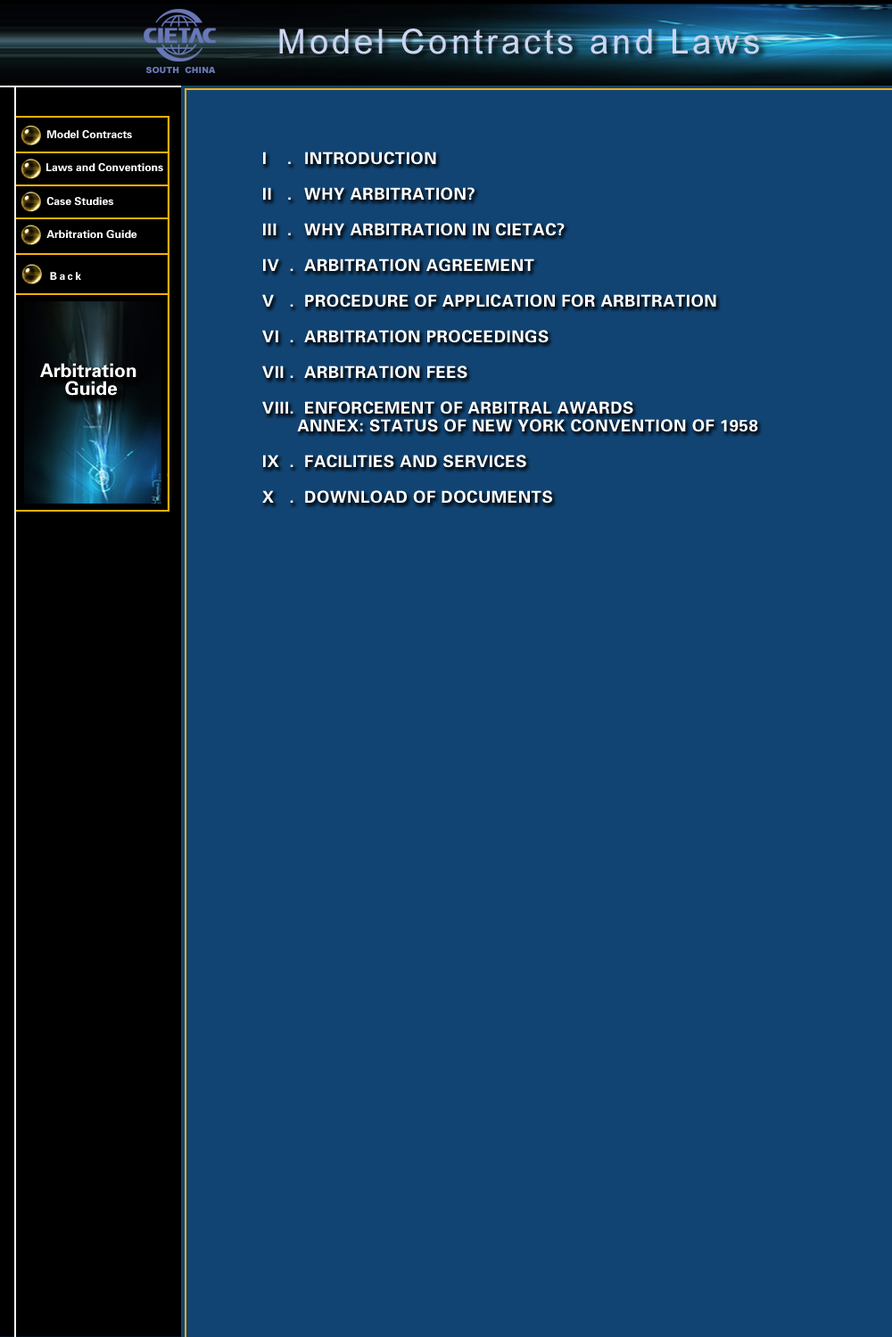
<style>
.page{position:relative;width:892px;height:1337px;background:#114473}
.page>*{position:absolute;margin:0}
.t1{font:10.9px "FZDHTJW--GB1-0";color:#ffffff}
.t2{font:16.6px/17.8px "FZDHTJW--GB1-0";letter-spacing:0.025em;color:#ffffff}
.t3{font:18.6px/17.9px "FZDHTJW--GB1-0";color:#ffffff}
</style>
<div class="page">
<p class="t1" style="left:47px;top:130px;width:85px;height:8px">Model Contracts</p>
<p class="t2" style="left:262px;top:152px;width:496px;height:352px">I    . INTRODUCTION  <br>                                                                                      <br>II   . WHY ARBITRATION?<br><br>III  . WHY ARBITRATION IN CIETAC?<br><br>IV  . ARBITRATION AGREEMENT<br><br>V   . PROCEDURE OF APPLICATION FOR ARBITRATION<br><br>VI  . ARBITRATION PROCEEDINGS<br><br>VII . ARBITRATION FEES<br><br>VIII. ENFORCEMENT OF ARBITRAL AWARDS<br>       ANNEX: STATUS OF NEW YORK CONVENTION OF 1958<br> <br>IX  . FACILITIES AND SERVICES<br><br>X   . DOWNLOAD OF DOCUMENTS</p>
<p class="t1" style="left:46px;top:163px;width:117px;height:8px">Laws and Conventions</p>
<p class="t1" style="left:46px;top:197px;width:67px;height:8px">Case Studies</p>
<p class="t1" style="left:46px;top:230px;width:91px;height:8px">Arbitration Guide</p>
<p class="t3" style="left:40px;top:363px;width:96px;height:33px;text-align:center">Arbitration <br>Guide</p>
</div>
